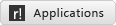
<style>
.page{position:relative;width:116px;height:25px}
.page>*{position:absolute;margin:0}
.t1{font:11px "MicrosoftJhengHeiRegular";letter-spacing:0.05em;color:#222222}
</style>
<div class="page">
<p class="t1" style="left:33px;top:8px;width:71px;height:12px">Applications</p>
</div>
